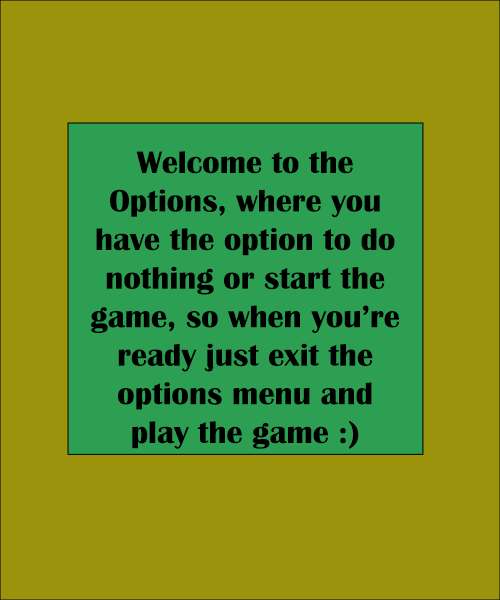
<style>
.page{position:relative;width:500px;height:600px;background:#9b930b}
.page>*{position:absolute;margin:0}
.t1{font:32.1px "BritannicBold";color:#000000}
</style>
<div class="page">
<p class="t1" style="left:91px;top:151px;width:308px;height:298px;text-align:center">Welcome to the Options, where you have the option to do nothing or start the game, so when you’re ready just exit the options menu and play the game :)</p>
</div>
